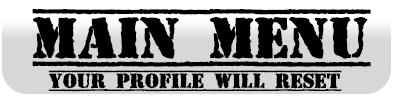
<style>
.page{position:relative;width:400px;height:100px;background:#000000}
.page>*{position:absolute;margin:0}
.t1{font:58.4px "TopSecret";letter-spacing:-0.02em;color:#000000;text-transform:uppercase;font-weight:bold}
.t2{font:20.9px "TopSecret";letter-spacing:-0.02em;color:#000000;text-transform:uppercase;font-weight:bold}
</style>
<div class="page">
<p class="t1" style="left:32px;top:9px;width:339px;height:58px">main menu</p>
<p class="t2" style="left:48px;top:70px;width:294px;height:22px">your profile will reset</p>
</div>
